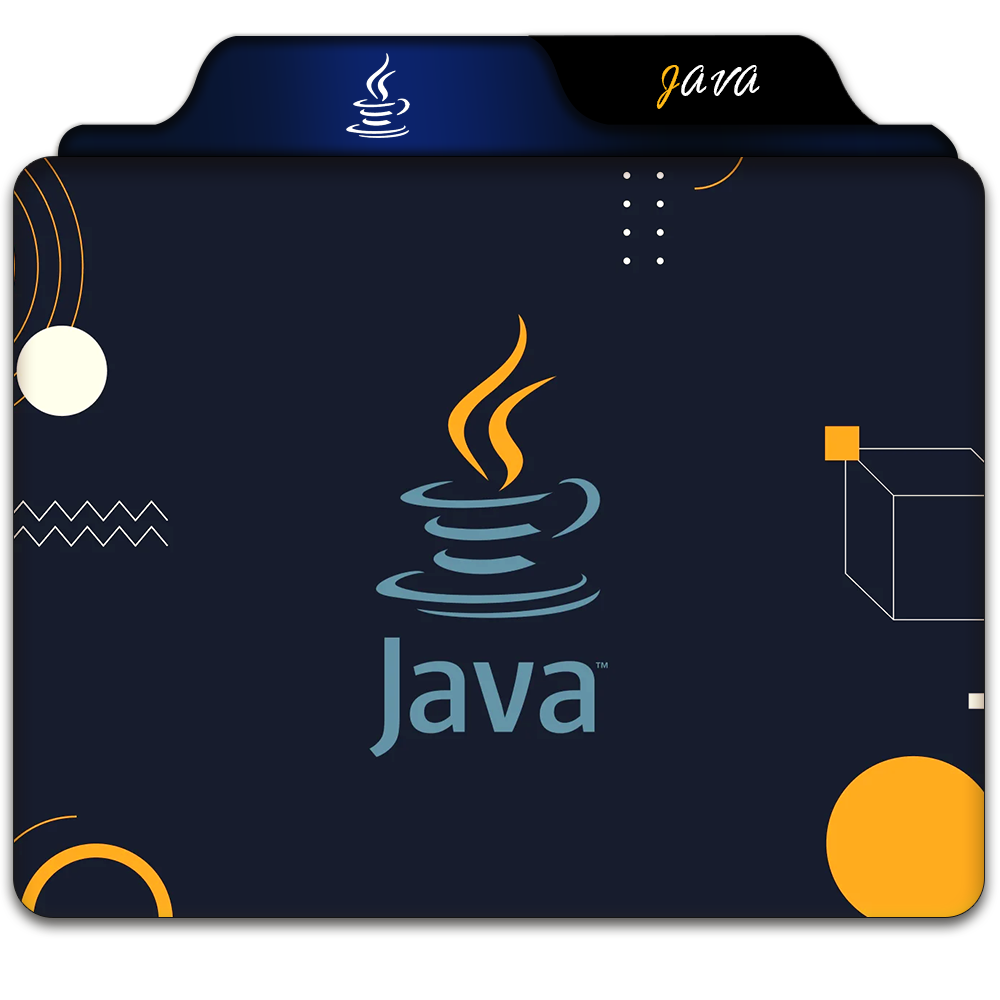
<style>
.page{position:relative;width:1000px;height:1000px;background:#171c2d}
.page>*{position:absolute;margin:0}
.t1{font:45.8px "RageItalic";color:#ffffff}
.t2{font:45.8px "RageItalic";color:#ffba16}
</style>
<div class="page">
<p class="t1" style="left:656px;top:65px;width:104px;height:44px"><span class="t2">J</span>AVA</p>
</div>
